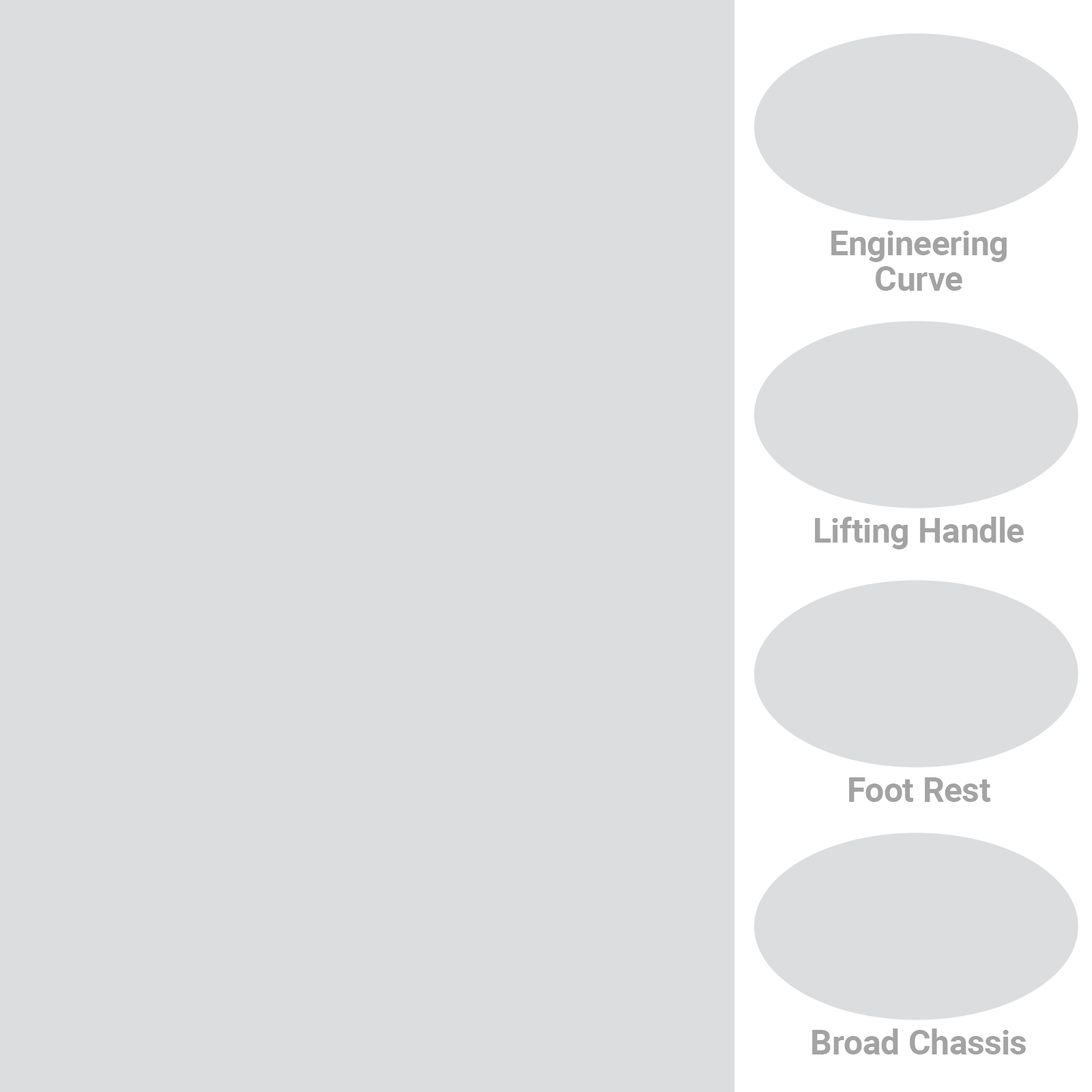
<style>
.page{position:relative;width:1092px;height:1092px;background:#dcdddf}
.page>*{position:absolute;margin:0}
.t1{font:34.3px/35.3px "Roboto-Bold";color:#a3a3a3}
.t2{font:34.3px "Roboto-Bold";color:#a3a3a3}
</style>
<div class="page">
<p class="t1" style="left:831px;top:231px;width:176px;height:60px;text-align:center">Engineering<br>Curve</p>
<p class="t2" style="left:815px;top:517px;width:209px;height:32px">Lifting Handle</p>
<p class="t2" style="left:849px;top:777px;width:141px;height:25px">Foot Rest</p>
<p class="t2" style="left:812px;top:1029px;width:214px;height:25px">Broad Chassis</p>
</div>
